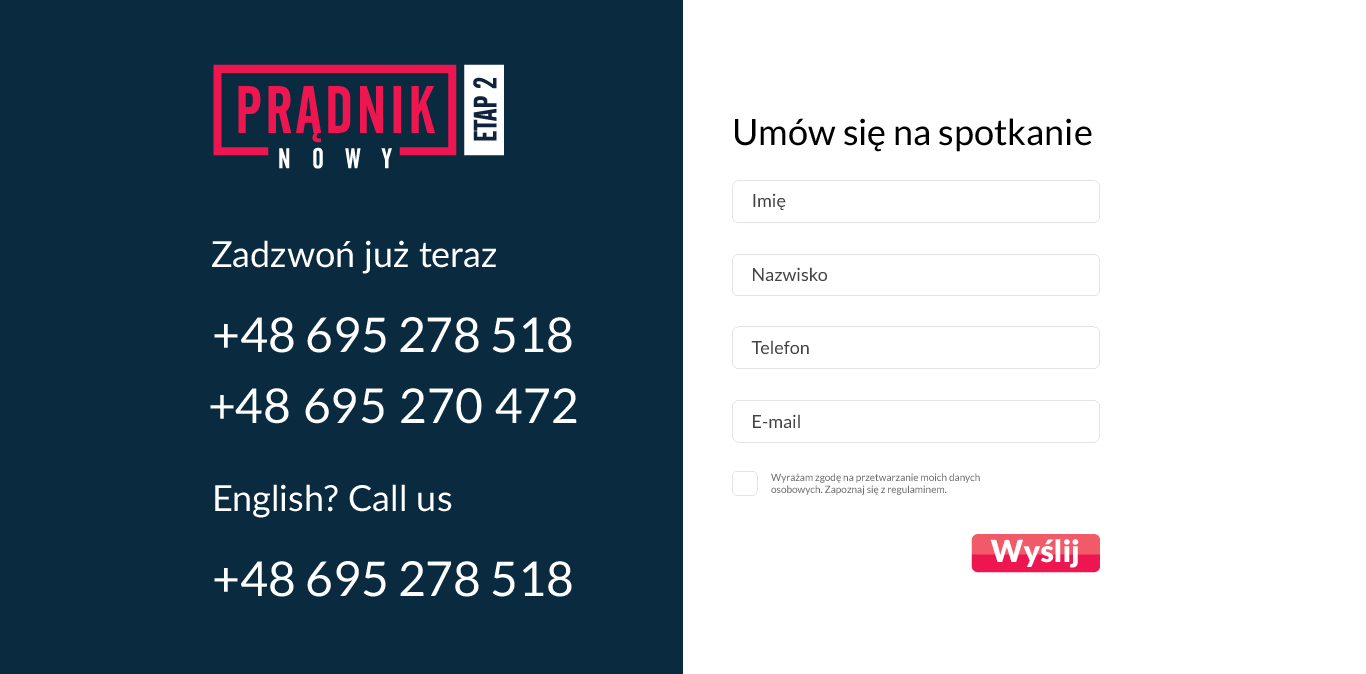
<style>
.page{position:relative;width:1366px;height:674px;background:#ffffff}
.page>*{position:absolute;margin:0}
.t1{font:36px "Lato-Regular";color:#000000}
.t2{font:18px "Lato-Regular";color:#444444}
.t3{font:36px "Lato-Regular";color:#ffffff}
.t4{font:48px "Lato-Regular";color:#ffffff}
.t5{font:10px/12px "Lato-Regular";color:#6b6b6b}
.t6{font:30.5px "Lato-Black";color:#ffffff}
</style>
<div class="page">
<p class="t1" style="left:735px;top:118px;width:357px;height:34px">Umów się na spotkanie</p>
<p class="t2" style="left:753px;top:193px;width:33px;height:17px">Imię</p>
<p class="t3" style="left:212px;top:240px;width:284px;height:34px">Zadzwoń już teraz</p>
<p class="t2" style="left:753px;top:267px;width:74px;height:15px">Nazwisko</p>
<p class="t4" style="left:214px;top:317px;width:358px;height:36px">+48 695 278 518</p>
<p class="t2" style="left:751px;top:340px;width:58px;height:14px">Telefon</p>
<p class="t4" style="left:210px;top:388px;width:367px;height:36px">+48 695 270 472</p>
<p class="t2" style="left:753px;top:414px;width:47px;height:15px">E-mail</p>
<p class="t5" style="left:771px;top:473px;width:209px;height:22px">Wyrażam zgodę na przetwarzanie moich danych<br>osobowych. Zapoznaj się z regulaminem.</p>
<p class="t3" style="left:215px;top:484px;width:237px;height:34px">English? Call us</p>
<p class="t6" style="left:990px;top:539px;width:89px;height:29px">Wyślij</p>
<p class="t4" style="left:214px;top:561px;width:358px;height:36px">+48 695 278 518</p>
</div>
